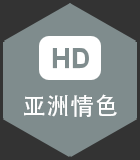
<style>
.page{position:relative;width:140px;height:160px;background:#7f8c8d}
.page>*{position:absolute;margin:0}
.t1{font:24px "AdobeHeitiStd-Regular";color:#ffffff}
</style>
<div class="page">
<p class="t1" style="left:24px;top:94px;width:93px;height:23px">亚洲情色</p>
</div>
